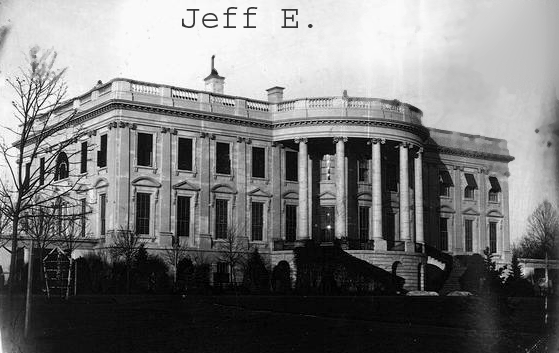
<style>
.page{position:relative;width:559px;height:353px}
.page>*{position:absolute;margin:0}
.t1{font:33.3px "Courier";color:#373737}
</style>
<div class="page">
<p class="t1" style="left:182px;top:7px;width:131px;height:21px">Jeff E.</p>
</div>
